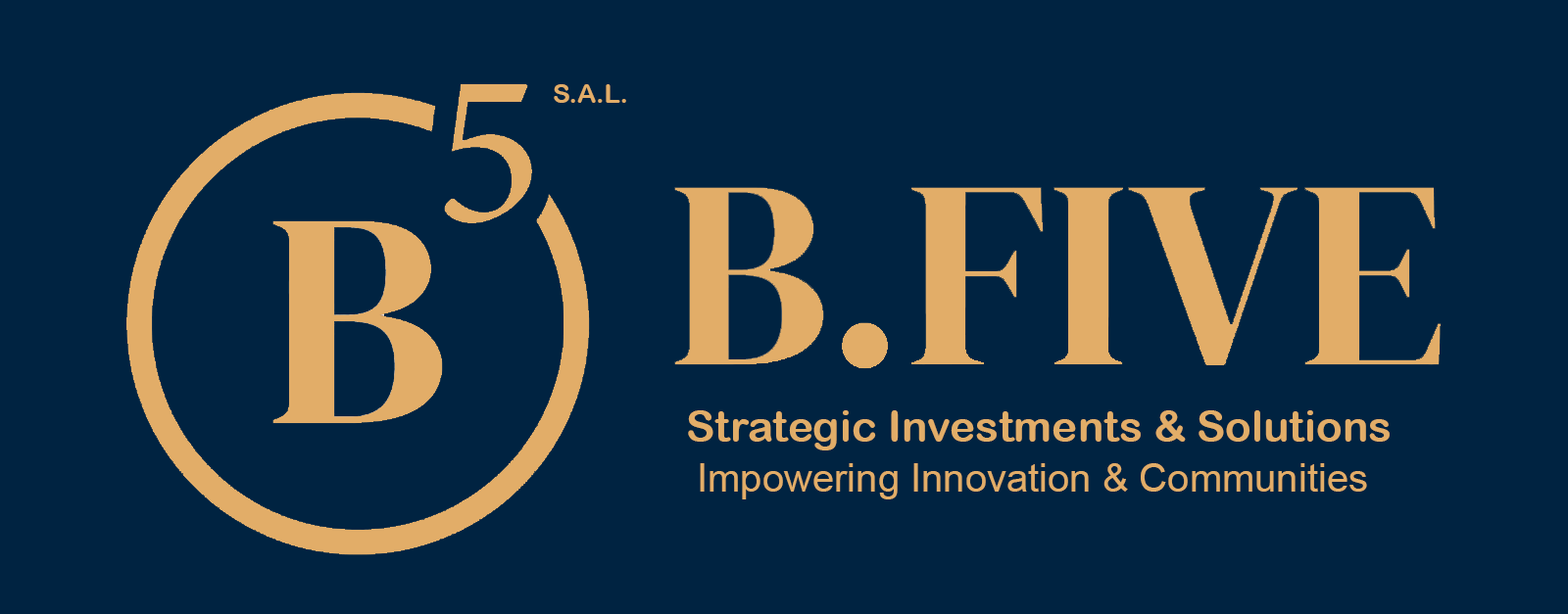
<style>
.page{position:relative;width:1568px;height:614px;background:#002341}
.page>*{position:absolute;margin:0}
.t1{font:26.1px "ArialRoundedMTBold";color:#e2ad68}
.t2{font:43.1px "ArialRoundedMTBold";color:#e2ad68}
.t3{font:39.2px "ArialMT";color:#e2ad68}
</style>
<div class="page">
<p class="t1" style="left:554px;top:84px;width:72px;height:19px">S.A.L.</p>
<p class="t2" style="left:688px;top:411px;width:702px;height:40px">Strategic Investments &amp; Solutions</p>
<p class="t3" style="left:700px;top:464px;width:667px;height:36px">Impowering Innovation &amp; Communities</p>
</div>
